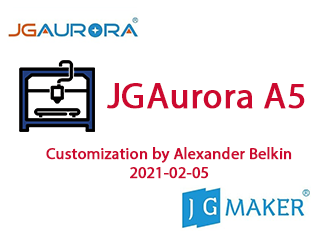
<style>
.page{position:relative;width:320px;height:240px;background:#ffffff}
.page>*{position:absolute;margin:0}
.t1{font:36.4px "MyriadPro-Regular";color:#cc092f;font-weight:bold}
.t2{font:16px "MyriadPro-Regular";color:#cc092f;font-weight:bold}
</style>
<div class="page">
<p class="t1" style="left:107px;top:83px;width:198px;height:26px">JGAurora A5</p>
<p class="t2" style="left:46px;top:147px;width:246px;height:32px;text-align:center">Customization by Alexander Belkin<br>2021-02-05</p>
</div>
